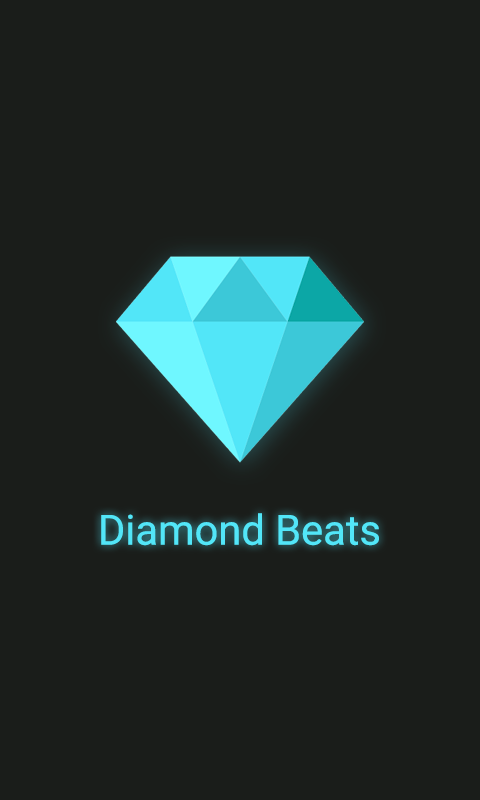
<style>
.page{position:relative;width:480px;height:800px;background:#1a1d1a}
.page>*{position:absolute;margin:0}
.t1{font:41.7px "Roboto-Regular";color:#52e6f8}
</style>
<div class="page">
<p class="t1" style="left:101px;top:513px;width:278px;height:33px">Diamond Beats</p>
</div>
